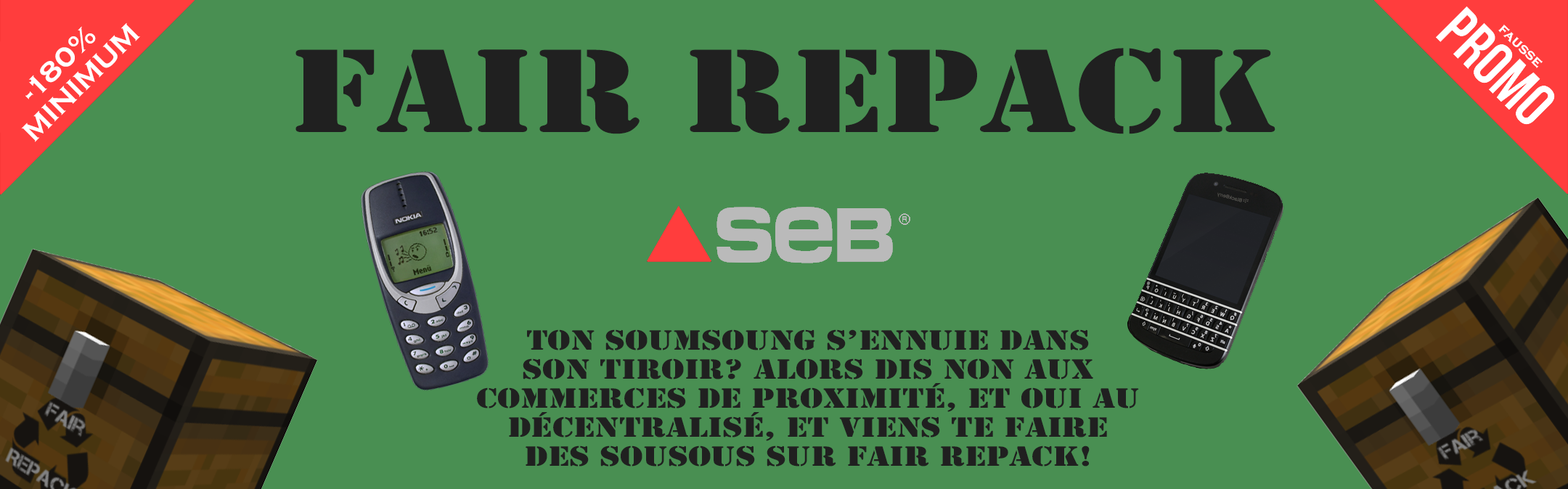
<style>
.page{position:relative;width:1568px;height:489px;background:#498f52}
.page>*{position:absolute;margin:0}
.t1{font:29px "CopperplateGothic-Bold";color:#ffffff}
.t2{font:14.5px "CopperplateGothic-Bold";color:#ffffff}
.t3{font:123.4px "ArmyWide";color:#202020}
.t4{font:29px "ArmyWide";color:#202020}
</style>
<div class="page">
<p class="t1" style="left:21px;top:23px;width:119px;height:119px;text-align:center;rotate:-45deg">-180% <br>MINIMUM</p>
<p class="t2" style="left:1498px;top:24px;width:45px;height:44px;rotate:44deg">fausse</p>
<p class="t3" style="left:295px;top:48px;width:980px;height:86px">Fair repack</p>
<p class="t4" style="left:477px;top:330px;width:662px;height:137px;text-align:center">ton soumsoung s’ennuie dans <br>son tiroir? Alors dis non aux <br>commerces de proximité, et oui au <br>décentralisé, et viens te faire <br>des sousous sur Fair repack!</p>
</div>
